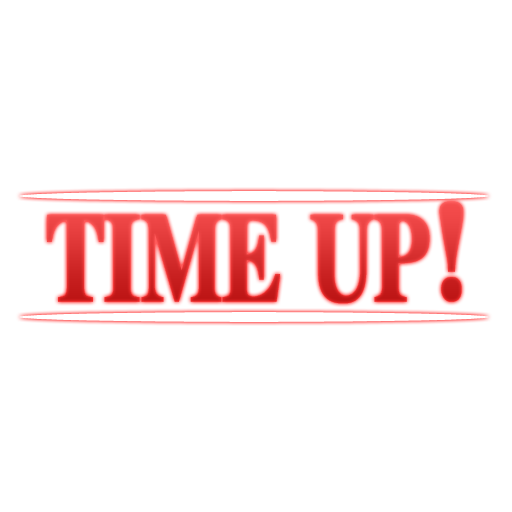
<style>
.page{position:relative;width:512px;height:512px;background:#ffffff}
.page>*{position:absolute;margin:0}
.t1{font:117.8px "DFLeiGaSo-W9-WINP-RKSJ-H";font-weight:bold;scale:0.69 1}
</style>
<div class="page">
<p class="t1" style="left:47px;top:201px;width:416px;height:103px">TIME UP!</p>
</div>
